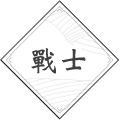
<style>
.page{position:relative;width:120px;height:120px;background:#ffffff}
.page>*{position:absolute;margin:0}
.t1{font:30px "WeibeiTC-Bold";color:#403e3e}
</style>
<div class="page">
<p class="t1" style="left:31px;top:48px;width:55px;height:26px">戰士</p>
</div>
